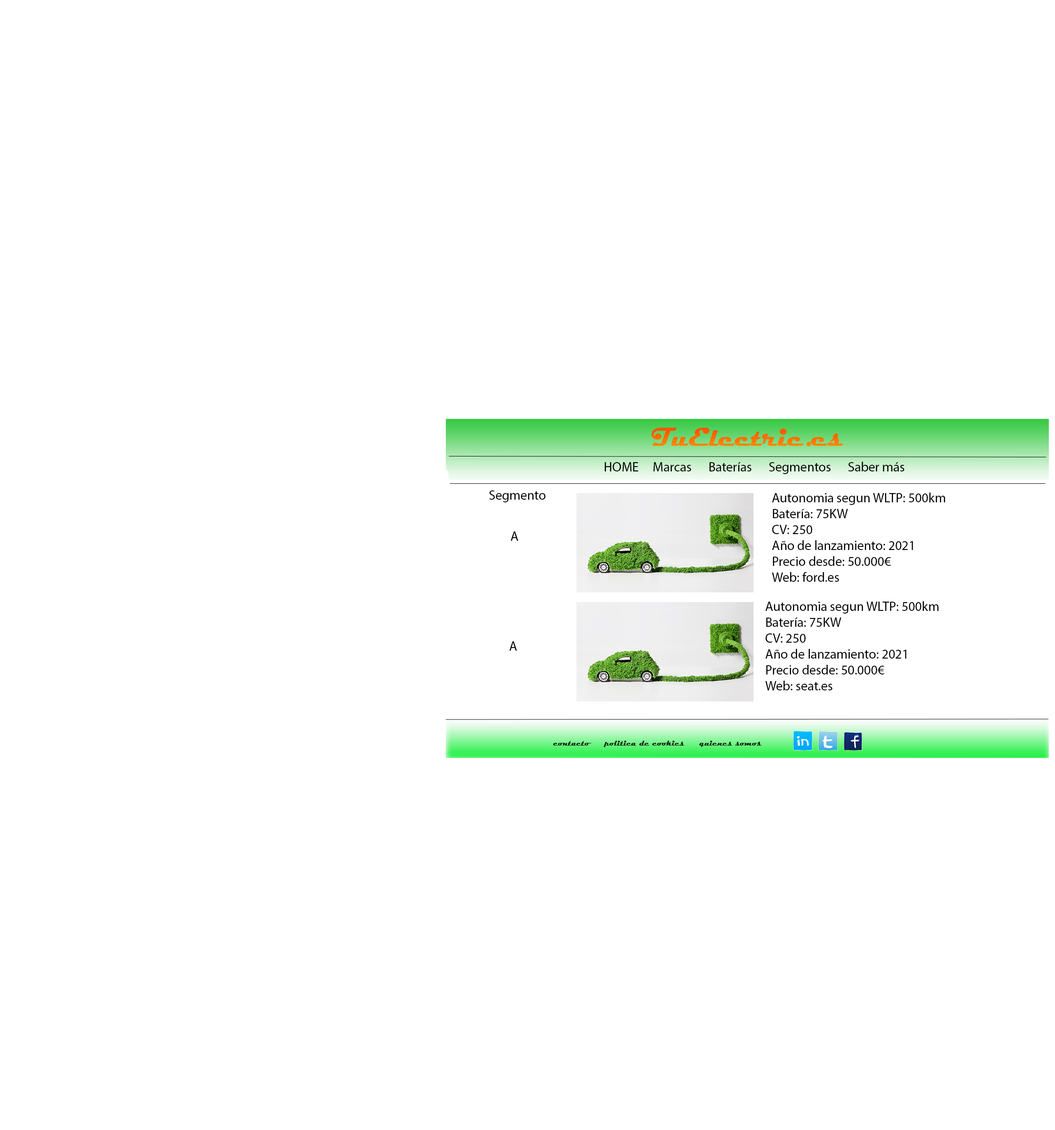
<style>
.page{position:relative;width:1055px;height:1130px;background:#ffffff}
.page>*{position:absolute;margin:0}
.t1{font:26.5px "Magneto-Bold";color:#ff7800}
.t2{font:13.2px "MyriadPro-Regular";color:#000000}
.t3{font:7.9px "Magneto-Bold";color:#021002}
</style>
<div class="page">
<p class="t1" style="left:652px;top:428px;width:192px;height:18px">TuElectric.es</p>
<p class="t2" style="left:605px;top:462px;width:300px;height:12px">HOME     Marcas      Baterías      Segmentos      Saber más</p>
<p class="t2" style="left:489px;top:490px;width:57px;height:12px">Segmento</p>
<p class="t2" style="left:772px;top:493px;width:173px;height:89px">Autonomia segun WLTP: 500km<br>Batería: 75KW<br>CV: 250<br>Año de lanzamiento: 2021<br>Precio desde: 50.000€<br>Web: ford.es</p>
<p class="t2" style="left:511px;top:532px;width:7px;height:9px">A</p>
<p class="t2" style="left:766px;top:601px;width:173px;height:89px">Autonomia segun WLTP: 500km<br>Batería: 75KW<br>CV: 250<br>Año de lanzamiento: 2021<br>Precio desde: 50.000€<br>Web: seat.es</p>
<p class="t2" style="left:509px;top:641px;width:8px;height:10px">A</p>
<p class="t3" style="left:553px;top:741px;width:209px;height:6px">contacto     politica de cookies     quienes somos</p>
</div>
